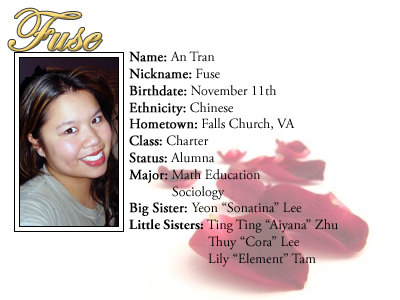
<style>
.page{position:relative;width:400px;height:300px;background:#ffffff}
.page>*{position:absolute;margin:0}
.t1{font:14px "AGaramondPro-Regular";color:#000000}
.t2{font:14px "AGaramondPro-Regular";color:#000000;font-weight:bold}
.t3{font:14px "AGaramondPro-Bold";color:#000000}
</style>
<div class="page">
<p class="t1" style="left:129px;top:51px;width:209px;height:216px"><span class="t2">Name:</span> An Tran<br><span class="t2">Nickname:</span> Fuse<br><span class="t2">Birthdate:</span> November 11th<br><span class="t2">Ethnicity:</span> Chinese<br><span class="t2">Hometown:</span> Falls Church, VA<br><span class="t2">Class:</span> Charter<br><span class="t2">Status:</span> Alumna<br><span class="t2">Major:</span> Math Education<br>   Sociology<br><span class="t2">Big Sister: </span>Yeon “Sonatina” Lee<br><span class="t3">Little Sisters: </span>Ting Ting “Aiyana” Zhu<br>    Thuy “Cora” Lee<br>    Lily “Element” Tam</p>
</div>
